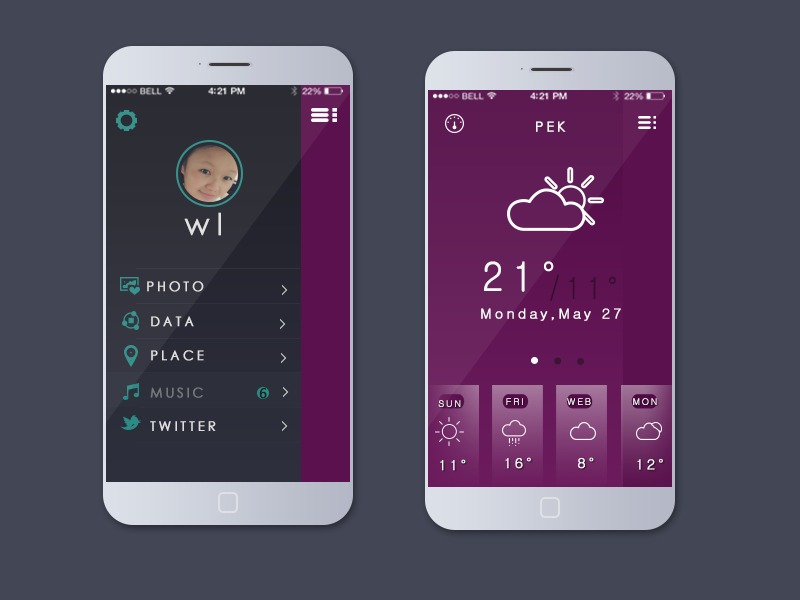
<style>
.page{position:relative;width:800px;height:600px;background:#424655}
.page>*{position:absolute;margin:0}
.t1{font:14px "CenturyGothic";letter-spacing:0.2em;color:#f8f8f8;font-weight:bold}
.t2{font:30px "CenturyGothic";letter-spacing:0.2em;color:#dfdfdf;font-weight:bold}
.t3{font:39.6px "Gulim";letter-spacing:0.2em;color:#f8f8f8;font-weight:bold;scale:0.94 1}
.t4{font:13.2px "CenturyGothic";letter-spacing:0.2em;color:#dfdfdf;font-weight:bold}
.t5{font:29.7px "Gulim";letter-spacing:0.2em;color:#380e30;font-weight:bold;scale:0.88 1}
.t6{font:13.8px "Gulim";letter-spacing:0.2em;color:#fffeff;font-weight:bold}
.t7{font:13.2px "CenturyGothic";letter-spacing:0.2em;color:#75777d;font-weight:bold}
.t8{font:14px "SegoeUI";letter-spacing:0.2em;color:#1e1e26;font-weight:bold}
.t9{font:9px "Gulim";letter-spacing:0.2em;font-weight:bold}
.t10{font:9px "Gulim";letter-spacing:0.2em;color:#fffeff;font-weight:bold}
</style>
<div class="page">
<p class="t1" style="left:536px;top:121px;width:30px;height:11px">PEK</p>
<p class="t2" style="left:184px;top:212px;width:37px;height:24px">wl</p>
<p class="t3" style="left:484px;top:261px;width:70px;height:31px">21°</p>
<p class="t4" style="left:147px;top:281px;width:57px;height:11px">PHOTO</p>
<p class="t5" style="left:550px;top:274px;width:66px;height:28px">/11°</p>
<p class="t4" style="left:151px;top:316px;width:43px;height:11px">DATA</p>
<p class="t6" style="left:481px;top:308px;width:140px;height:13px">Monday,May 27</p>
<p class="t4" style="left:151px;top:350px;width:53px;height:11px">PLACE</p>
<p class="t7" style="left:150px;top:387px;width:53px;height:11px">MUSIC</p>
<p class="t8" style="left:259px;top:388px;width:8px;height:11px">6</p>
<p class="t9" style="left:438px;top:400px;width:23px;height:7px">SUN</p>
<p class="t10" style="left:506px;top:398px;width:17px;height:7px">FRI</p>
<p class="t10" style="left:567px;top:398px;width:24px;height:7px">WEB</p>
<p class="t10" style="left:633px;top:398px;width:24px;height:7px">MON</p>
<p class="t4" style="left:150px;top:421px;width:66px;height:10px">TWITTER</p>
<p class="t6" style="left:440px;top:459px;width:26px;height:12px">11°</p>
<p class="t6" style="left:505px;top:457px;width:26px;height:12px">16°</p>
<p class="t6" style="left:578px;top:457px;width:16px;height:12px">8°</p>
<p class="t6" style="left:637px;top:459px;width:26px;height:11px">12°</p>
</div>
